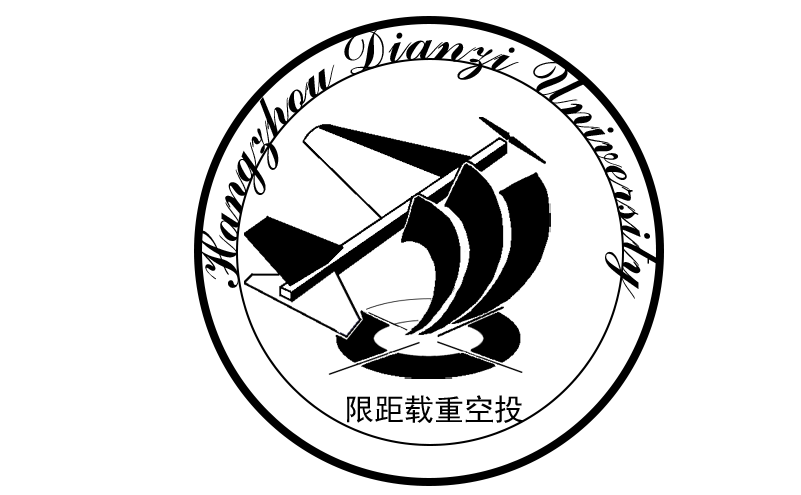
<style>
.page{position:relative;width:801px;height:495px;background:#ffffff}
.page>*{position:absolute;margin:0}
.t1{font:60px "CommercialScriptBT-Regular";color:#000000}
.t2{font:30px "SimHei";color:#000000}
</style>
<div class="page">
<p class="t1" style="left:197px;top:29px;width:460px;height:270px;text-align:center">Hangzhou Dianzi University</p>
<p class="t2" style="left:347px;top:395px;width:176px;height:28px">限距载重空投</p>
</div>
